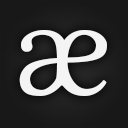
<style>
.page{position:relative;width:128px;height:128px;background:#181818}
.page>*{position:absolute;margin:0}
.t1{font:144px "LibertinusSerif-Regular";color:#f4f4f4}
</style>
<div class="page">
<p class="t1" style="left:19px;top:30px;width:88px;height:66px">æ</p>
</div>
